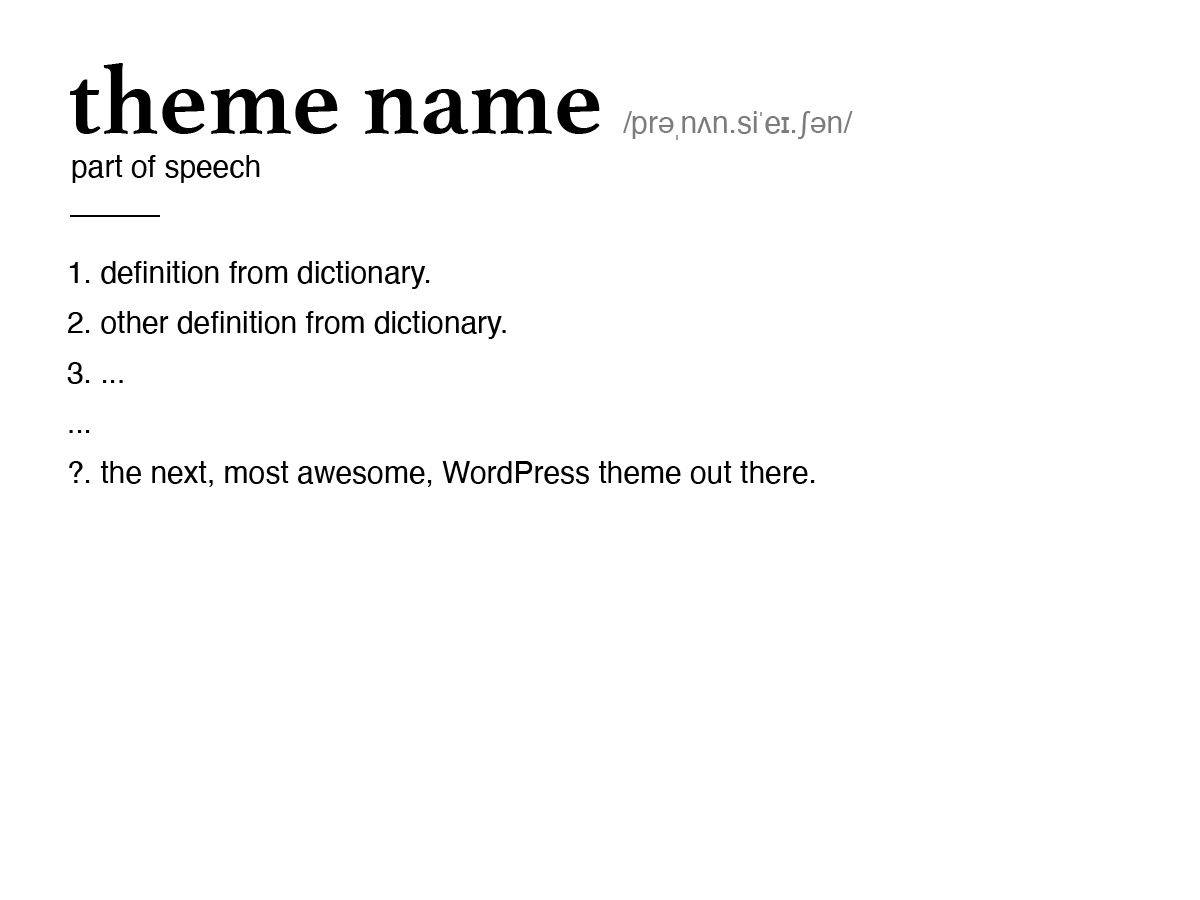
<style>
.page{position:relative;width:1200px;height:900px;background:#ffffff}
.page>*{position:absolute;margin:0}
.t1{font:30px "Helvetica";color:#7c7c7c}
.t2{font:100px "Athelas-Bold";color:#000000}
.t3{font:30px "Helvetica";color:#000000}
.t4{font:30px/50px "Helvetica";color:#000000}
</style>
<div class="page">
<p class="t1" style="left:70px;top:63px;width:783px;height:77px"><span class="t2">theme name </span>/prəˌnʌn.siˈeɪ.ʃən/</p>
<p class="t3" style="left:72px;top:155px;width:188px;height:28px">part of speech</p>
<p class="t4" style="left:67px;top:261px;width:748px;height:226px">1. definition from dictionary.<br>2. other definition from dictionary.<br>3. ...<br>...<br>?. the next, most awesome, WordPress theme out there.</p>
</div>
